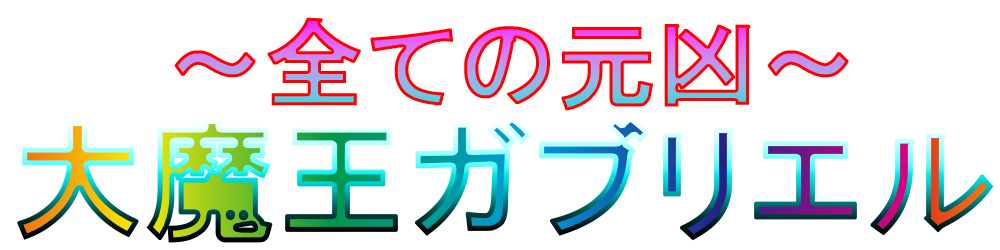
<style>
.page{position:relative;width:1000px;height:250px;background:#ffffff}
.page>*{position:absolute;margin:0}
.t1{font:97.9px "HGPGothicE";font-weight:bold}
.t2{font:128.4px "HGPGothicE";font-weight:bold}
</style>
<div class="page">
<p class="t1" style="left:174px;top:17px;width:675px;height:94px">～全ての元凶～</p>
<p class="t2" style="left:17px;top:115px;width:977px;height:128px">大魔王ガブリエル</p>
</div>
